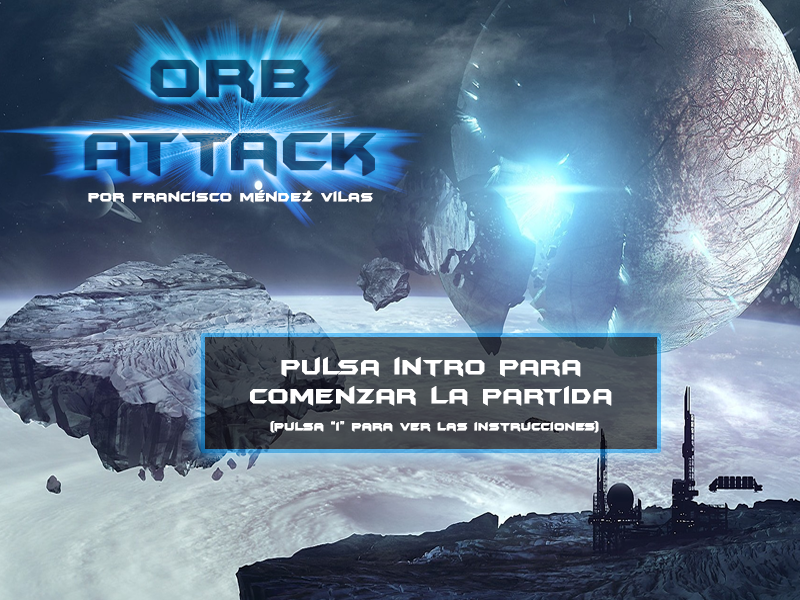
<style>
.page{position:relative;width:800px;height:600px}
.page>*{position:absolute;margin:0}
.t1{font:61px "BatmanForeverAlternate";font-weight:bold}
.t2{font:14px "BatmanForeverAlternate";color:#ffffff;font-weight:bold}
.t3{font:24px "BatmanForeverAlternate";color:#ffffff;font-weight:bold}
.t4{font:12px "BatmanForeverAlternate";color:#ffffff;font-weight:bold}
</style>
<div class="page">
<p class="t1" style="left:85px;top:60px;width:292px;height:116px;text-align:center">orb<br>attack</p>
<p class="t2" style="left:88px;top:190px;width:285px;height:13px">por francisco méndez vilas</p>
<p class="t3" style="left:250px;top:357px;width:362px;height:49px;text-align:center">pulsa intro para<br>comenzar la partida</p>
<p class="t4" style="left:270px;top:421px;width:329px;height:12px">(pulsa “i” para ver las instrucciones)</p>
</div>
